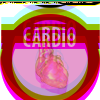
<style>
.page{position:relative;width:100px;height:100px}
.page>*{position:absolute;margin:0}
.t1{font:20.8px "MyriadPro-BoldCond"}
</style>
<div class="page">
<p class="t1" style="left:23px;top:19px;width:53px;height:14px">CARDIO</p>
</div>
